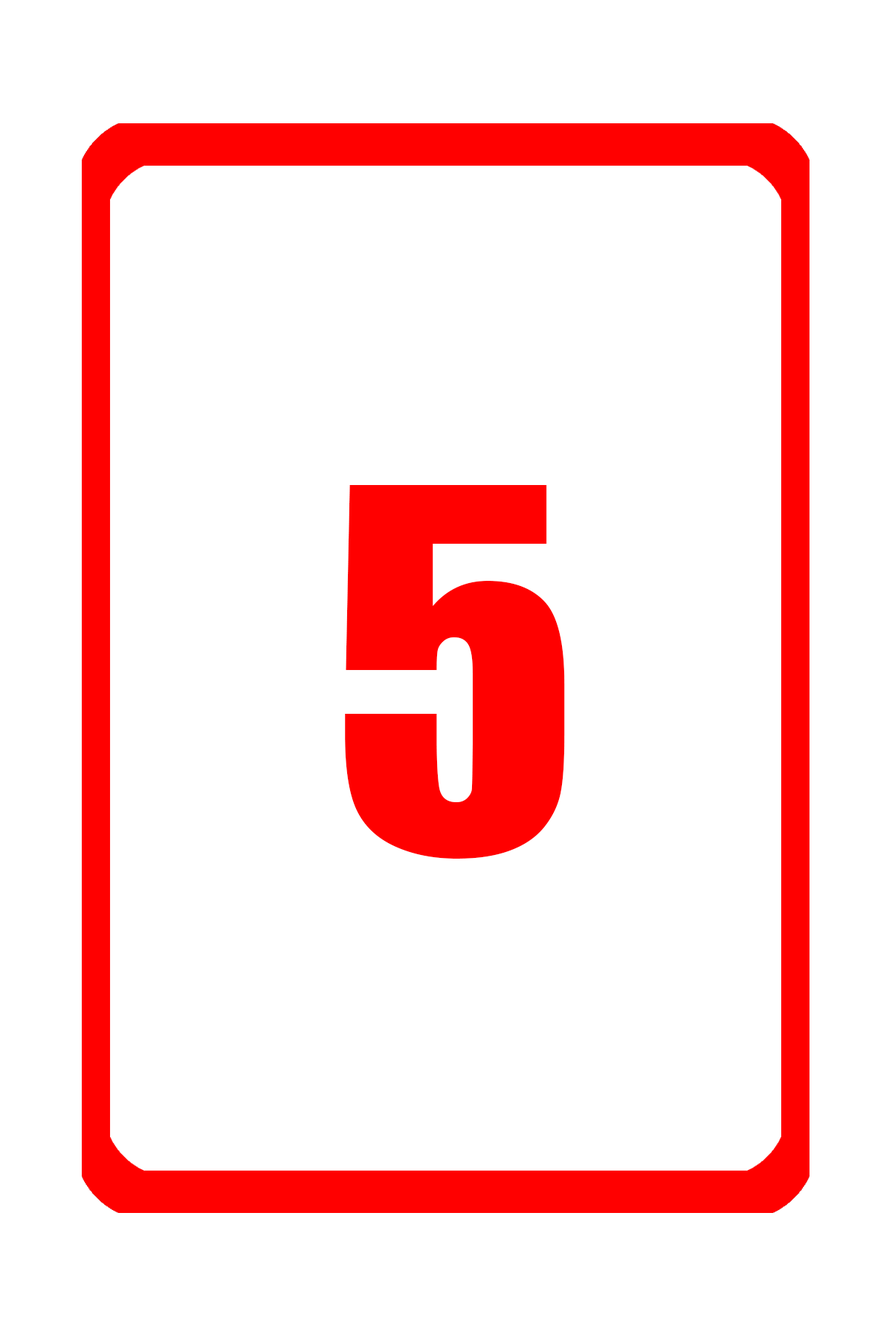
<style>
.page{position:relative;width:892px;height:1337px;background:#ffffff}
.page>*{position:absolute;margin:0}
.t1{font:464.4px "Impact";color:#ff0000}
</style>
<div class="page">
<p class="t1" style="left:345px;top:485px;width:220px;height:374px">5</p>
</div>
